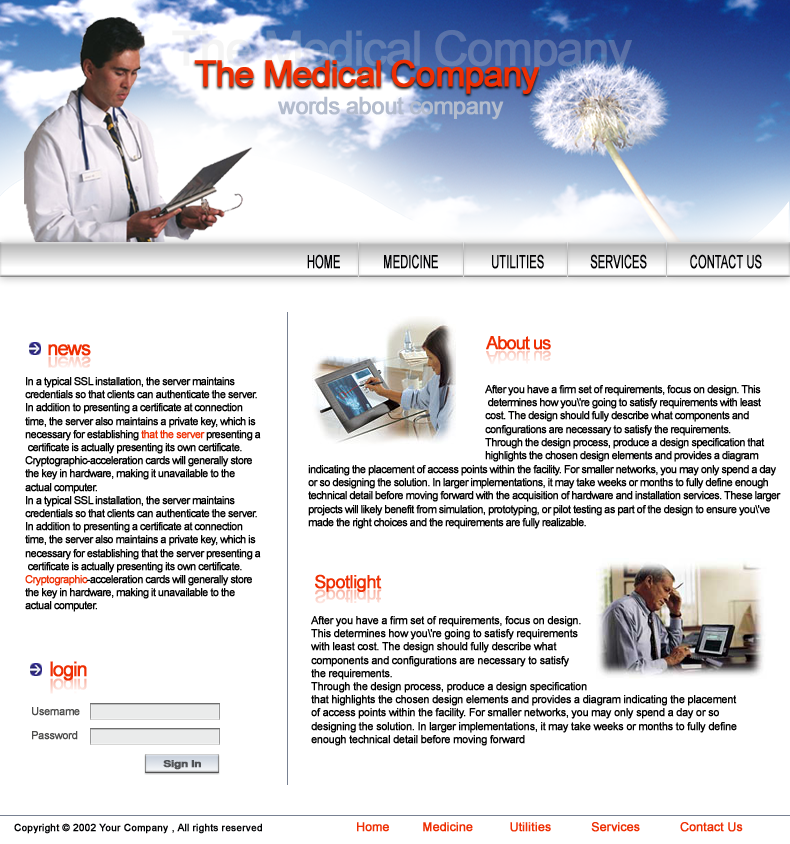
<style>
.page{position:relative;width:790px;height:844px;background:#ffffff}
.page>*{position:absolute;margin:0}
.t1{font:36px "ArialMT";letter-spacing:-0.05em;color:#ee2e02;font-weight:bold}
.t2{font:18px "ArialMT";color:#000002;font-weight:bold;scale:0.6 1}
.t3{font:18px "ArialMT";letter-spacing:-0.075em;color:#ee2e02;font-weight:bold}
.t4{font:20px "ArialMT";letter-spacing:-0.075em;color:#ee2e02;font-weight:bold}
.t5{font:11px "ArialMT";letter-spacing:-0.075em;color:#000000;font-weight:bold}
.t6{font:11px "ArialMT";letter-spacing:-0.075em;color:#ee2e02;font-weight:bold}
.t7{font:11px "ArialMT";letter-spacing:-0.075em;color:#000001;font-weight:bold}
.t8{font:18px "ArialMT";letter-spacing:-0.05em;color:#ee2e02;font-weight:bold}
.t9{font:11px "ArialMT";letter-spacing:-0.05em;color:#000000;font-weight:bold}
.t10{font:11px "ArialMT";letter-spacing:-0.05em;color:#4d4d4c;font-weight:bold}
.t11{font:9.6px "Arial-BoldMT";letter-spacing:-0.05em;color:#515357;font-weight:bold;scale:1.25 1}
.t12{font:12px "ArialMT";color:#ee2e02;font-weight:bold}
.t13{font:10px "ArialMT";color:#000103;font-weight:bold}
</style>
<div class="page">
<p class="t1" style="left:194px;top:59px;width:346px;height:35px">The Medical Company</p>
<p class="t2" style="left:307px;top:254px;width:455px;height:15px">HOME             MEDICINE                UTILITIES              SERVICES             CONTACT US</p>
<p class="t3" style="left:486px;top:336px;width:65px;height:14px">About us</p>
<p class="t4" style="left:48px;top:344px;width:43px;height:12px">news</p>
<p class="t5" style="left:25px;top:377px;width:236px;height:235px">In a typical SSL installation, the server maintains <br>credentials so that clients can authenticate the server. <br>In addition to presenting a certificate at connection <br>time, the server also maintains a private key, which is<br>necessary for establishing<span class="t6"> that the server</span> presenting a<br> certificate is actually presenting its own certificate. <br>Cryptographic-acceleration cards will generally store <br>the key in hardware, making it unavailable to the <br>actual computer.<br>In a typical SSL installation, the server maintains <br>credentials so that clients can authenticate the server. <br>In addition to presenting a certificate at connection <br>time, the server also maintains a private key, which is<br>necessary for establishing that the server presenting a<br> certificate is actually presenting its own certificate. <br><span class="t6">Cryptographic</span>-acceleration cards will generally store <br>the key in hardware, making it unavailable to the <br>actual computer.</p>
<p class="t7" style="left:485px;top:385px;width:280px;height:77px">After you have a firm set of requirements, focus on design. This<br> determines how you\'re going to satisfy requirements with least <br>cost. The design should fully describe what components and <br>configurations are necessary to satisfy the requirements. <br>Through the design process, produce a design specification that <br>highlights the chosen design elements and provides a diagram</p>
<p class="t5" style="left:308px;top:465px;width:473px;height:64px">indicating the placement of access points within the facility. For smaller networks, you may only spend a day <br>or so designing the solution. In larger implementations, it may take weeks or months to fully define enough <br>technical detail before moving forward with the acquisition of hardware and installation services. These larger <br>projects will likely benefit from simulation, prototyping, or pilot testing as part of the design to ensure you\'ve <br>made the right choices and the requirements are fully realizable.</p>
<p class="t8" style="left:315px;top:574px;width:67px;height:18px">Spotlight</p>
<p class="t9" style="left:311px;top:616px;width:426px;height:130px">After you have a firm set of requirements, focus on design. <br>This determines how you\'re going to satisfy requirements <br>with least cost. The design should fully describe what <br>components and configurations are necessary to satisfy <br>the requirements. <br>Through the design process, produce a design specification <br>that highlights the chosen design elements and provides a diagram indicating the placement <br>of access points within the facility. For smaller networks, you may only spend a day or so <br>designing the solution. In larger implementations, it may take weeks or months to fully define <br>enough technical detail before moving forward</p>
<p class="t4" style="left:50px;top:661px;width:37px;height:20px">login</p>
<p class="t10" style="left:32px;top:707px;width:48px;height:9px">Username</p>
<p class="t10" style="left:32px;top:731px;width:46px;height:9px">Password</p>
<p class="t11" style="left:163px;top:760px;width:38px;height:10px">Sign In</p>
<p class="t12" style="left:357px;top:822px;width:386px;height:10px">Home         Medicine          Utilities           Services           Contact Us</p>
<p class="t13" style="left:14px;top:823px;width:248px;height:11px">Copyright © 2002 Your Company , All rights reserved</p>
</div>
